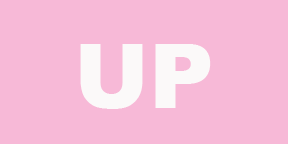
<style>
.page{position:relative;width:288px;height:144px;background:#f7b9d7}
.page>*{position:absolute;margin:0}
.t1{font:90px "Arial-Black";color:#fbf9f9}
</style>
<div class="page">
<p class="t1" style="left:80px;top:44px;width:131px;height:65px">UP</p>
</div>
